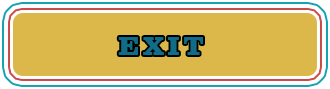
<style>
.page{position:relative;width:330px;height:89px;background:#dbb849}
.page>*{position:absolute;margin:0}
.t1{font:27px "ClarendonBT-Black";letter-spacing:0.15em;color:#116d87;text-transform:uppercase}
</style>
<div class="page">
<p class="t1" style="left:118px;top:37px;width:85px;height:18px">Exit</p>
</div>
